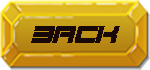
<style>
.page{position:relative;width:150px;height:70px}
.page>*{position:absolute;margin:0}
.t1{font:29.3px "Spac3-Techv17-Italic";color:#190808}
</style>
<div class="page">
<p class="t1" style="left:31px;top:26px;width:89px;height:17px">back</p>
</div>
